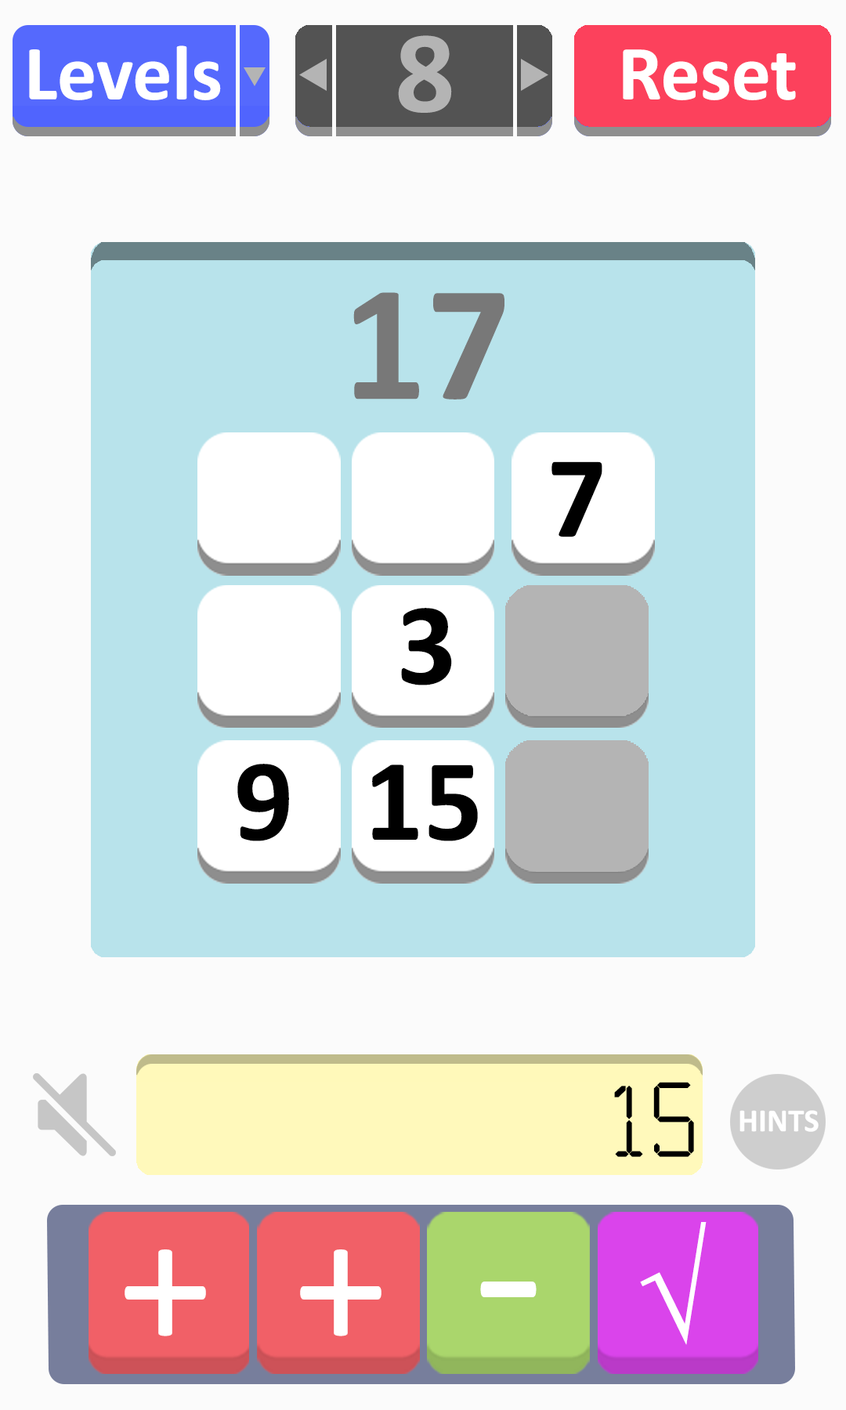
<style>
.page{position:relative;width:846px;height:1410px;background:#fbfbfb}
.page>*{position:absolute;margin:0}
.t1{font:117.6px "Calibri-Bold";color:#b4b4b4}
.t2{font:78.3px "Calibri-Bold";color:#ffffff}
.t3{font:166.9px "Calibri-Bold";color:#787878}
.t4{font:117.6px "Calibri-Bold";color:#000000}
.t5{font:117.5px "Calculator";color:#000000}
.t6{font:128.7px "TimesNewRomanPSMT";color:#ffffff}
.t7{font:188.3px "Calibri";color:#ffffff}
.t8{font:231.5px "Calibri";color:#ffffff}
</style>
<div class="page">
<p class="t1" style="left:398px;top:35px;width:54px;height:78px">8</p>
<p class="t2" style="left:29px;top:45px;width:192px;height:55px">Levels</p>
<p class="t2" style="left:623px;top:49px;width:173px;height:51px">Reset</p>
<p class="t3" style="left:353px;top:292px;width:151px;height:107px">17</p>
<p class="t4" style="left:551px;top:461px;width:51px;height:76px">7</p>
<p class="t4" style="left:401px;top:608px;width:51px;height:77px">3</p>
<p class="t4" style="left:237px;top:764px;width:52px;height:77px">9</p>
<p class="t4" style="left:372px;top:764px;width:106px;height:77px">15</p>
<p class="t5" style="left:614px;top:1082px;width:80px;height:75px">15</p>
<p class="t6" style="left:640px;top:1222px;width:66px;height:123px">√</p>
<p class="t7" style="left:125px;top:1249px;width:81px;height:87px">+</p>
<p class="t7" style="left:300px;top:1249px;width:81px;height:87px">+</p>
<p class="t8" style="left:480px;top:1281px;width:56px;height:16px">-</p>
</div>
